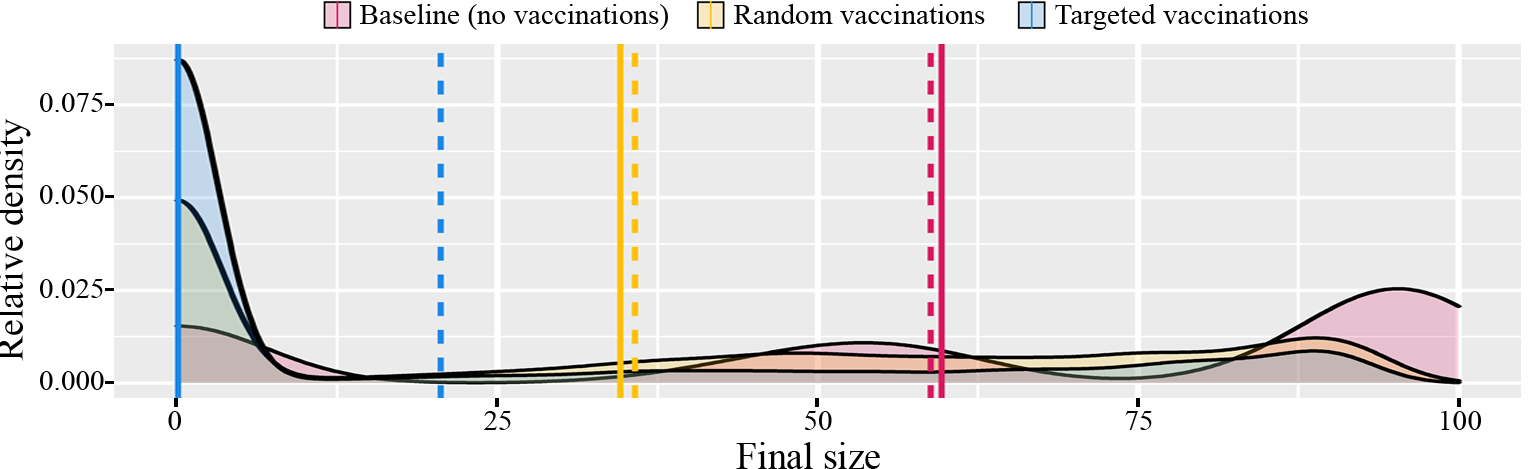
<style>
.page{position:relative;width:1535px;height:469px;background:#ebebeb}
.page>*{position:absolute;margin:0}
.t1{font:29.2px "TimesNewRomanPSMT";color:#010101}
.t2{font:37.5px "TimesNewRomanPSMT";color:#010101}
</style>
<div class="page">
<p class="t1" style="left:360px;top:4px;width:308px;height:26px">Baseline (no vaccinations)</p>
<p class="t1" style="left:734px;top:4px;width:251px;height:20px">Random vaccinations</p>
<p class="t1" style="left:1055px;top:4px;width:253px;height:26px">Targeted vaccinations</p>
<p class="t1" style="left:40px;top:93px;width:63px;height:19px">0.075</p>
<p class="t2" style="left:0px;top:118px;width:31px;height:243px;rotate:-90deg">Relative density</p>
<p class="t1" style="left:40px;top:185px;width:64px;height:19px">0.050</p>
<p class="t1" style="left:40px;top:279px;width:63px;height:19px">0.025</p>
<p class="t1" style="left:40px;top:371px;width:64px;height:19px">0.000</p>
<p class="t1" style="left:168px;top:411px;width:13px;height:19px">0</p>
<p class="t1" style="left:484px;top:411px;width:27px;height:19px">25</p>
<p class="t1" style="left:804px;top:411px;width:28px;height:19px">50</p>
<p class="t1" style="left:1125px;top:411px;width:27px;height:19px">75</p>
<p class="t1" style="left:1441px;top:411px;width:40px;height:19px">100</p>
<p class="t2" style="left:736px;top:442px;width:144px;height:27px">Final size</p>
</div>
